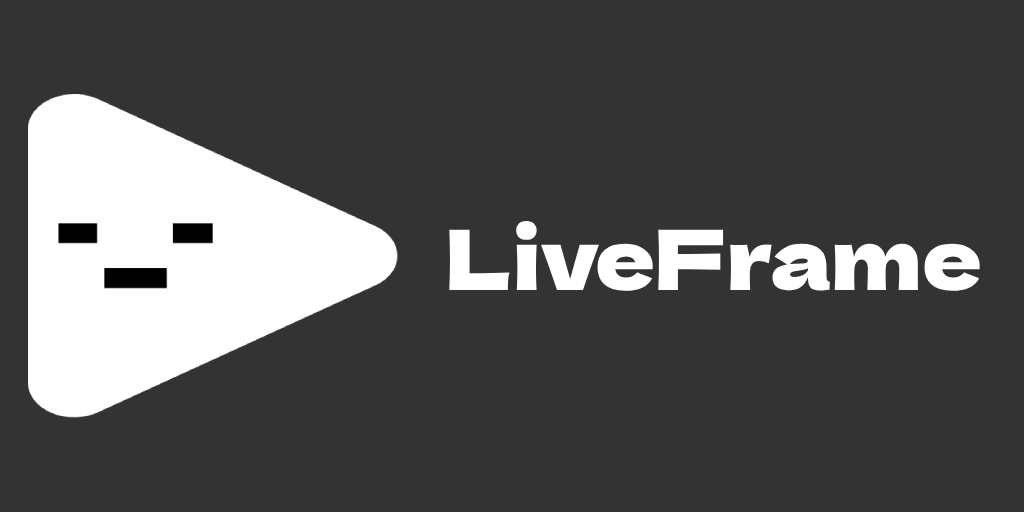
<style>
.page{position:relative;width:1024px;height:512px;background:#333333}
.page>*{position:absolute;margin:0}
.t1{font:83px "DelaGothicOne-Regular";color:#ffffff}
</style>
<div class="page">
<p class="t1" style="left:449px;top:221px;width:531px;height:70px">LiveFrame</p>
</div>
